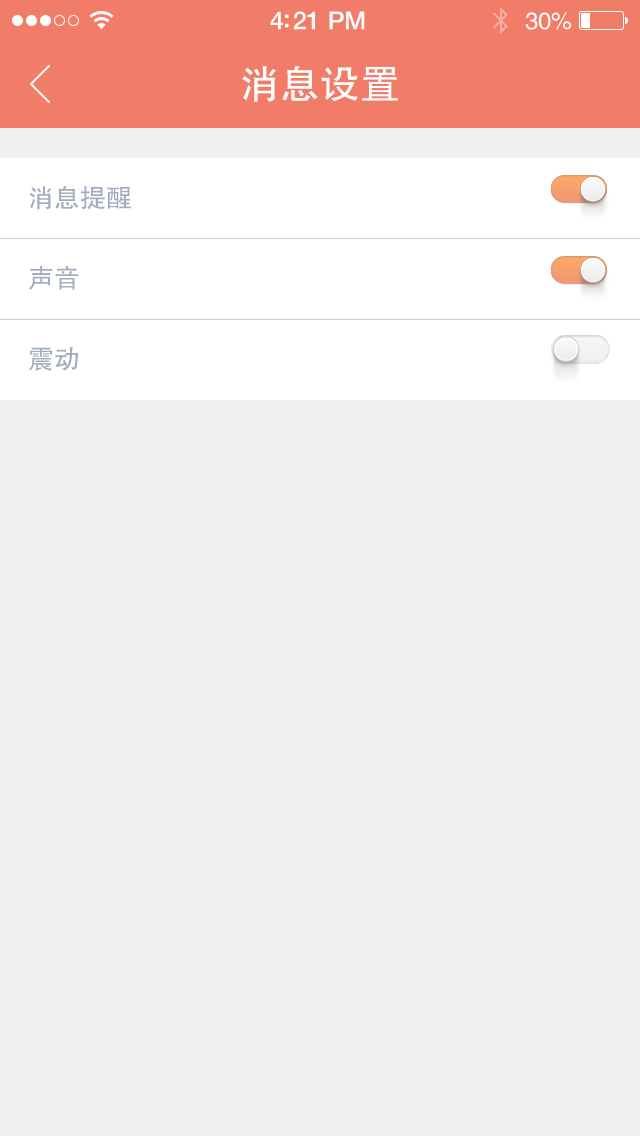
<style>
.page{position:relative;width:640px;height:1136px;background:#f0f0f0}
.page>*{position:absolute;margin:0}
.t1{font:25px "HelveticaNeue-Medium";letter-spacing:-0.02em;color:#ffffff}
.t2{font:24px "FZHTJW--GB1-0";letter-spacing:-0.02em;color:#ffffff}
.t3{font:40px "FZHTJW--GB1-0";color:#ffffff}
.t4{font:26px "FZHTJW--GB1-0";color:#a3abbe}
</style>
<div class="page">
<p class="t1" style="left:270px;top:11px;width:95px;height:19px">4:21 PM</p>
<p class="t2" style="left:525px;top:12px;width:46px;height:18px">30%</p>
<p class="t3" style="left:242px;top:65px;width:156px;height:37px">消息设置</p>
<p class="t4" style="left:29px;top:186px;width:102px;height:24px">消息提醒</p>
<p class="t4" style="left:28px;top:266px;width:51px;height:24px">声音</p>
<p class="t4" style="left:28px;top:347px;width:50px;height:24px">震动</p>
</div>
